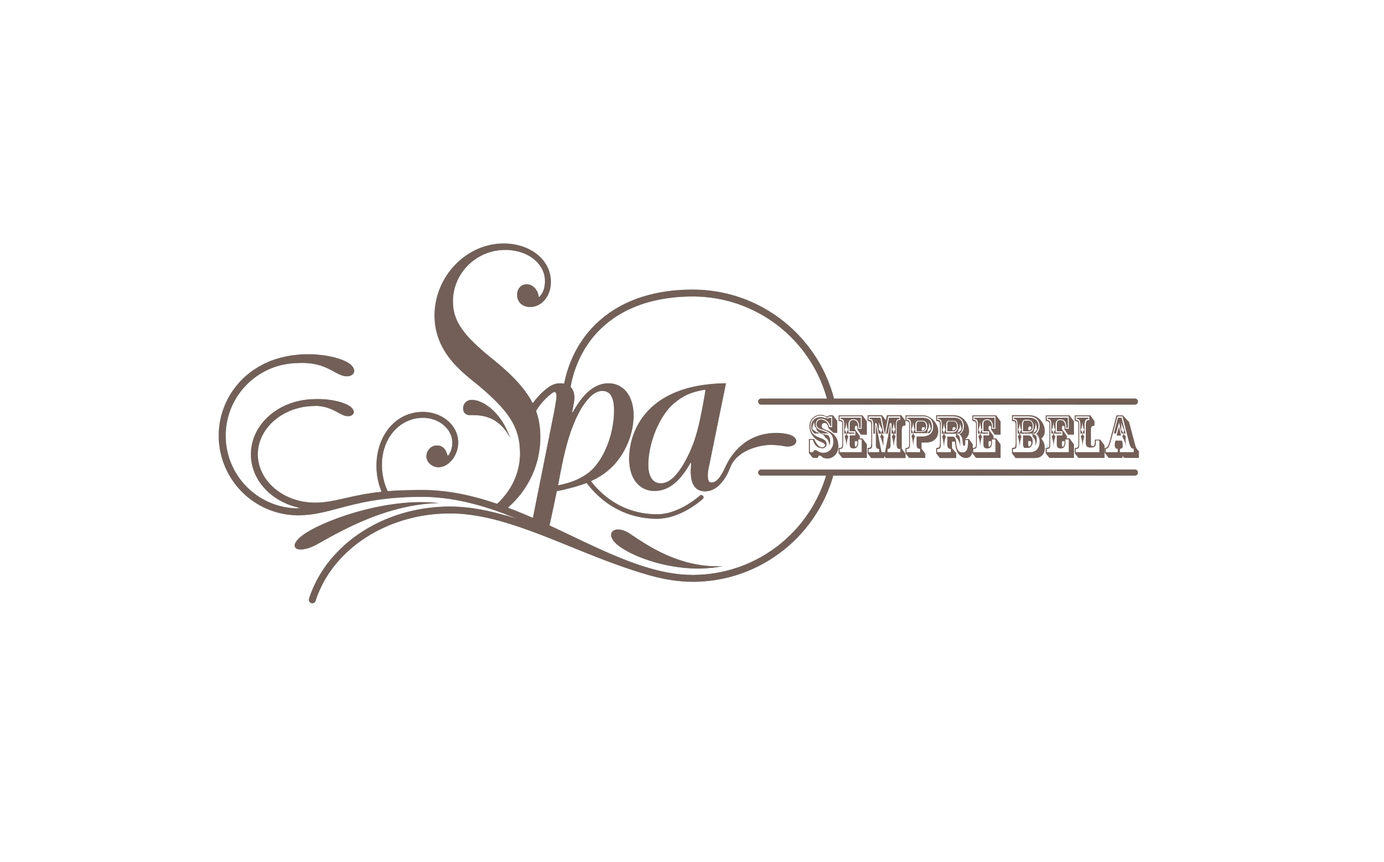
<style>
.page{position:relative;width:1384px;height:862px;background:#ffffff}
.page>*{position:absolute;margin:0}
.t1{font:56.2px "RosewoodStd-Regular";color:#735f58}
</style>
<div class="page">
<p class="t1" style="left:809px;top:415px;width:330px;height:43px">SEMPRE BELA</p>
</div>
